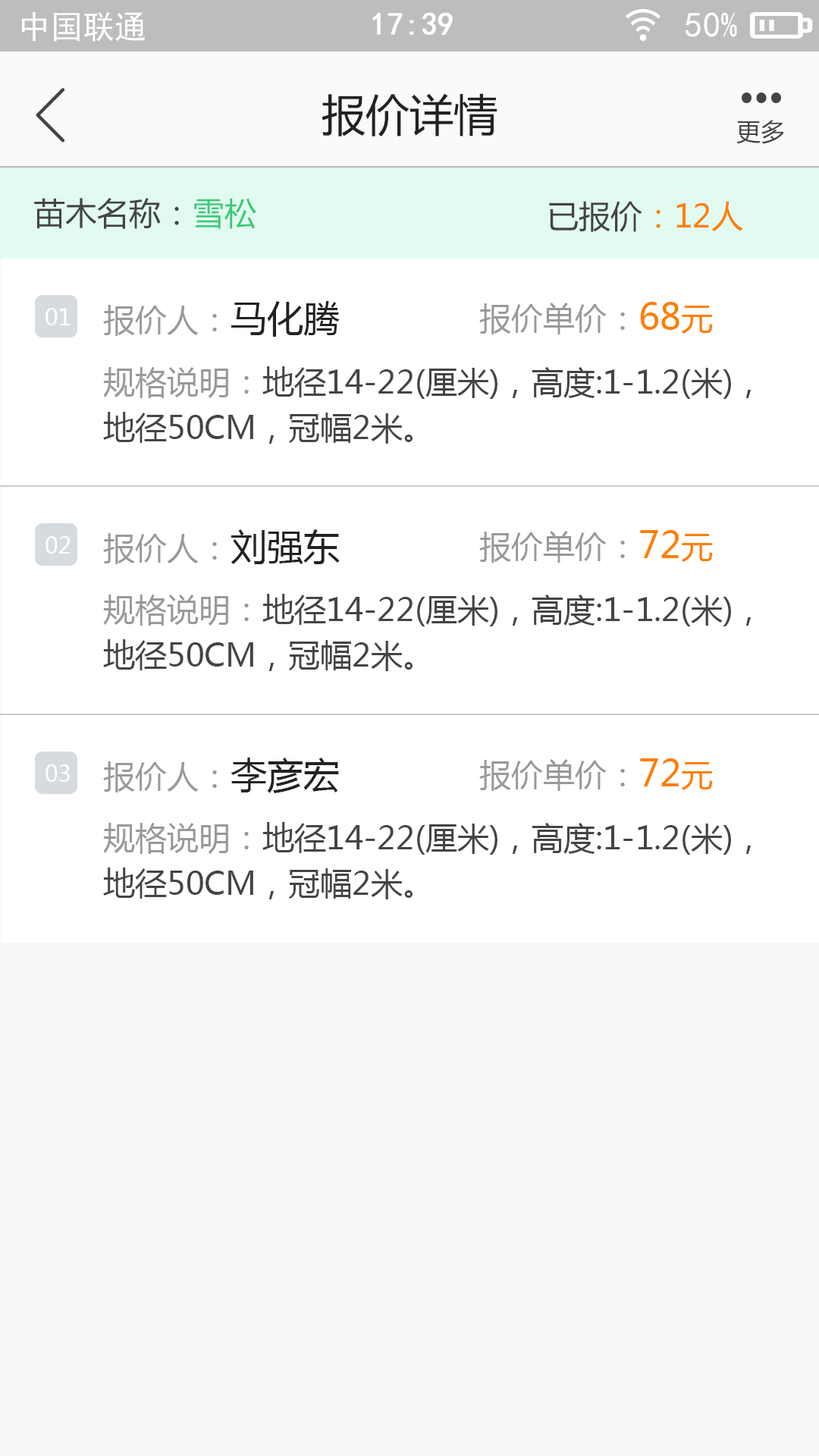
<style>
.page{position:relative;width:819px;height:1456px;background:#ffffff}
.page>*{position:absolute;margin:0}
.t1{font:31.8px "SimHei";color:#ffffff}
.t2{font:31.8px "SimHei";color:#ffffff;font-weight:bold}
.t3{font:35.3px "SimHei";color:#ffffff}
.t4{font:44px "MicrosoftYaHei";color:#222222}
.t5{font:24.3px "MicrosoftYaHei";color:#444444}
.t6{font:31.8px "MicrosoftYaHei";color:#444444}
.t7{font:31.8px "MicrosoftYaHei";color:#3cc977}
.t8{font:31.8px "MicrosoftYaHei";color:#ff7e00}
.t9{font:31.8px "MicrosoftYaHei";color:#999999}
.t10{font:36.4px "MicrosoftYaHei";color:#222222}
.t11{font:36.4px "MicrosoftYaHei";color:#ff7e00}
.t12{font:22.7px "MicrosoftYaHei";color:#ffffff}
.t13{font:31.8px/45.5px "MicrosoftYaHei";color:#444444}
.t14{font:31.8px/45.5px "MicrosoftYaHei";color:#999999}
</style>
<div class="page">
<p class="t1" style="left:22px;top:11px;width:124px;height:31px">中国联通</p>
<p class="t2" style="left:372px;top:12px;width:81px;height:23px">17:39</p>
<p class="t3" style="left:685px;top:12px;width:52px;height:25px">50%</p>
<p class="t4" style="left:322px;top:93px;width:175px;height:43px">报价详情</p>
<p class="t5" style="left:736px;top:120px;width:47px;height:24px">更多</p>
<p class="t6" style="left:34px;top:198px;width:222px;height:31px">苗木名称：<span class="t7">雪松</span></p>
<p class="t8" style="left:549px;top:201px;width:194px;height:31px"><span class="t6">已报价</span>：12人</p>
<p class="t9" style="left:103px;top:301px;width:237px;height:36px">报价人：<span class="t10">马化腾</span></p>
<p class="t9" style="left:479px;top:302px;width:234px;height:32px">报价单价：<span class="t11">68</span><span class="t8">元</span></p>
<p class="t12" style="left:45px;top:308px;width:26px;height:17px">01</p>
<p class="t13" style="left:103px;top:366px;width:648px;height:78px"><span class="t14">规格说明：</span>地径14-22(厘米)，高度:1-1.2(米)，地径50CM，冠幅2米。</p>
<p class="t9" style="left:103px;top:529px;width:237px;height:35px">报价人：<span class="t10">刘强东</span></p>
<p class="t9" style="left:479px;top:530px;width:234px;height:33px">报价单价：<span class="t11">72</span><span class="t8">元</span></p>
<p class="t12" style="left:45px;top:536px;width:25px;height:18px">02</p>
<p class="t13" style="left:103px;top:594px;width:648px;height:77px"><span class="t14">规格说明：</span>地径14-22(厘米)，高度:1-1.2(米)，地径50CM，冠幅2米。</p>
<p class="t9" style="left:103px;top:758px;width:236px;height:35px">报价人：<span class="t10">李彦宏</span></p>
<p class="t9" style="left:479px;top:758px;width:234px;height:33px">报价单价：<span class="t11">72</span><span class="t8">元</span></p>
<p class="t12" style="left:45px;top:764px;width:25px;height:18px">03</p>
<p class="t13" style="left:103px;top:822px;width:648px;height:77px"><span class="t14">规格说明：</span>地径14-22(厘米)，高度:1-1.2(米)，地径50CM，冠幅2米。</p>
</div>
